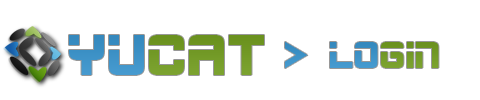
<style>
.page{position:relative;width:480px;height:100px;background:#ffffff}
.page>*{position:absolute;margin:0}
.t1{font:50px "ESP";color:#729c20}
.t2{font:50px "ESP";color:#3893cc}
.t3{font:32px "ESP";color:#3893cc}
.t4{font:32px "ESP";color:#729c20}
</style>
<div class="page">
<p class="t1" style="left:69px;top:35px;width:195px;height:40px"><span class="t2">Yu</span>cat</p>
<p class="t3" style="left:285px;top:42px;width:154px;height:26px">&gt; lo<span class="t4">gin</span></p>
</div>
